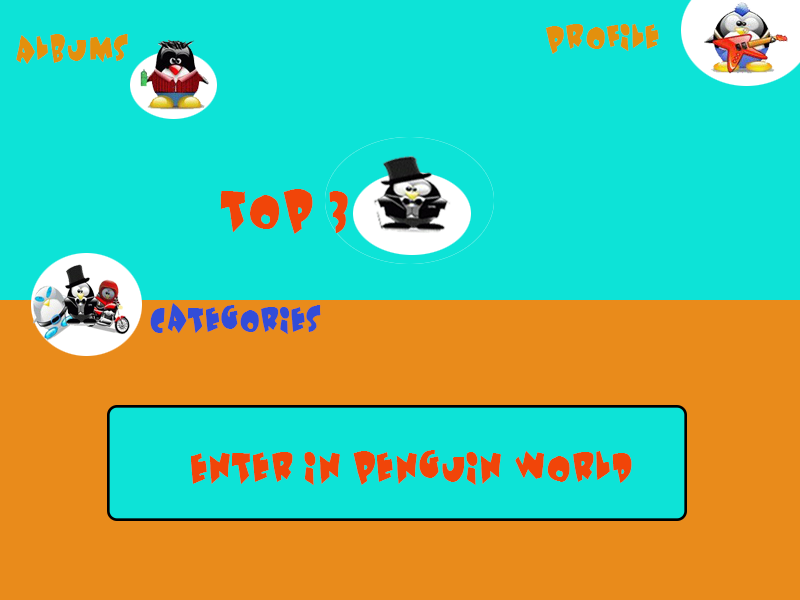
<style>
.page{position:relative;width:800px;height:600px;background:#0de3d7}
.page>*{position:absolute;margin:0}
.t1{font:30px "Underattack";color:#e3900d}
.t2{font:48px "Underattack";color:#f14509}
.t3{font:30px "Underattack";color:#324dd8}
.t4{font:36px "Underattack";color:#f14509}
</style>
<div class="page">
<p class="t1" style="left:546px;top:24px;width:113px;height:30px">Profile</p>
<p class="t1" style="left:16px;top:34px;width:112px;height:30px">Albums</p>
<p class="t2" style="left:220px;top:189px;width:128px;height:45px">top 3</p>
<p class="t3" style="left:150px;top:303px;width:171px;height:31px">Categories</p>
<p class="t4" style="left:191px;top:450px;width:441px;height:35px">Enter in penguin world</p>
</div>
